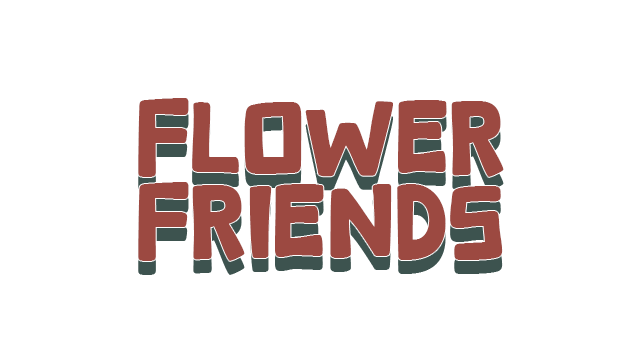
<style>
.page{position:relative;width:640px;height:360px;background:#ffffff}
.page>*{position:absolute;margin:0}
.t1{font:100px/83.3px "Burger-Free";color:#9c4941}
</style>
<div class="page">
<p class="t1" style="left:138px;top:98px;width:366px;height:163px">Flower<br>Friends</p>
</div>
